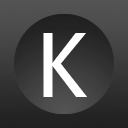
<style>
.page{position:relative;width:128px;height:128px}
.page>*{position:absolute;margin:0}
.t1{font:100px "Consolas";color:#ffffff}
</style>
<div class="page">
<p class="t1" style="left:43px;top:33px;width:44px;height:64px">K</p>
</div>
